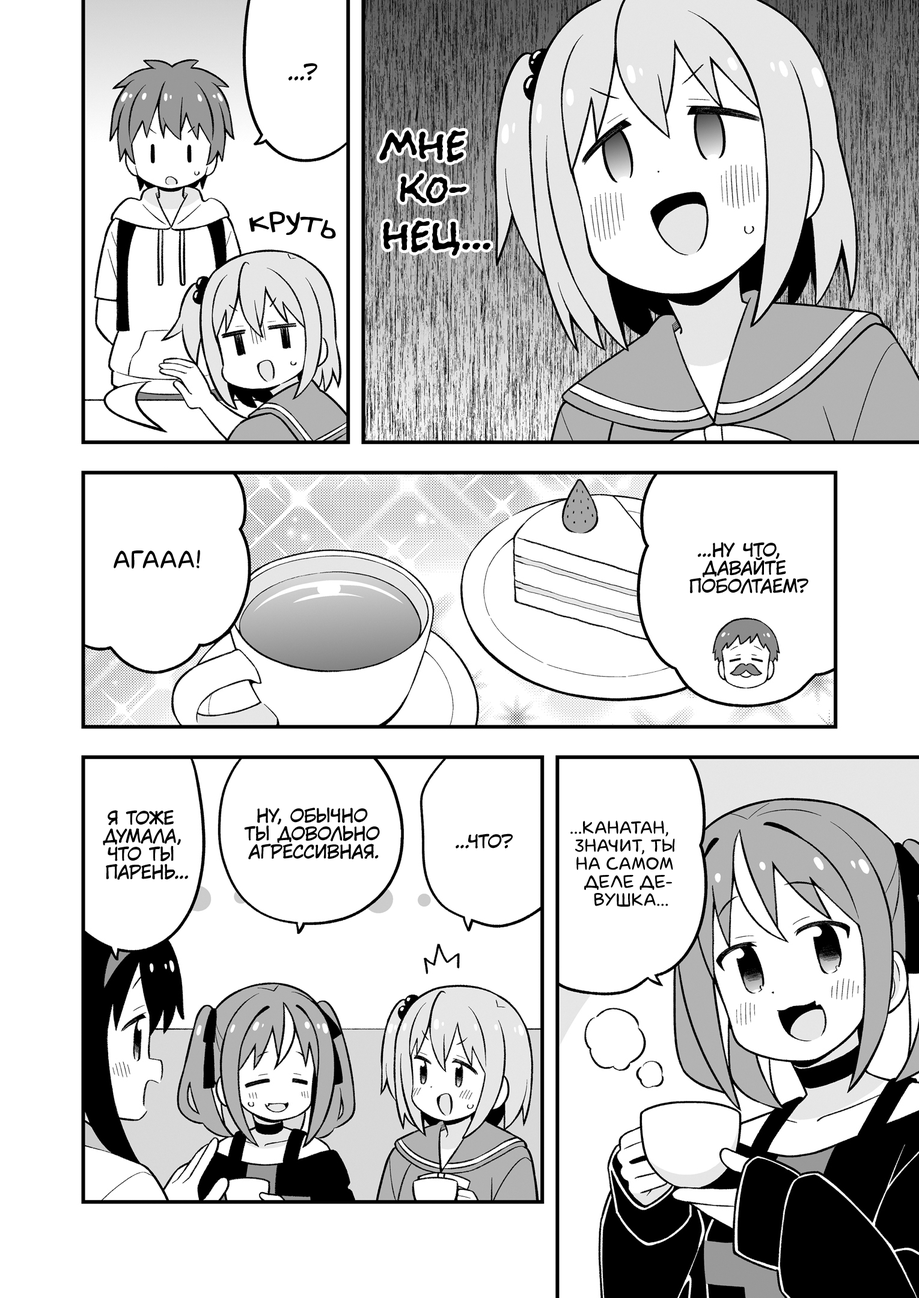
<style>
.page{position:relative;width:919px;height:1298px;background:#ffffff}
.page>*{position:absolute;margin:0}
.t1{font:21.6px "KuraiVoice2";color:#000000;text-transform:uppercase}
.t2{font:45.1px "el_CCEvilSchemes";color:#000000}
.t3{font:32.4px "v_Augie";color:#000000}
.t4{font:18px "KuraiVoice2";color:#000000;text-transform:uppercase}
.t5{font:25.2px "laCartoonerie";color:#000000;text-transform:uppercase}
.t6{font:18px "laCartoonerie";color:#000000;text-transform:uppercase}
</style>
<div class="page">
<p class="t1" style="left:288px;top:63px;width:29px;height:18px">...?</p>
<p class="t2" style="left:379px;top:130px;width:111px;height:126px;text-align:center">Мне<br>ко-<br>нец...</p>
<p class="t3" style="left:249px;top:212px;width:87px;height:27px;rotate:6deg">круть</p>
<p class="t4" style="left:689px;top:542px;width:119px;height:52px;text-align:center">...Ну что,<br>давайте<br>поболтаем?</p>
<p class="t5" style="left:114px;top:550px;width:86px;height:19px">Агааа!</p>
<p class="t4" style="left:103px;top:810px;width:85px;height:70px;text-align:center">Я тоже<br>думала,<br>что ты<br>парень...</p>
<p class="t4" style="left:244px;top:807px;width:136px;height:52px;text-align:center">Ну, обычно<br>ты довольно<br>агрессивная.</p>
<p class="t6" style="left:570px;top:820px;width:105px;height:87px;text-align:center">...Канатан,<br>значит, ты<br>на самом<br>деле де-<br>вушка...</p>
<p class="t4" style="left:455px;top:833px;width:58px;height:15px">...Что?</p>
</div>
